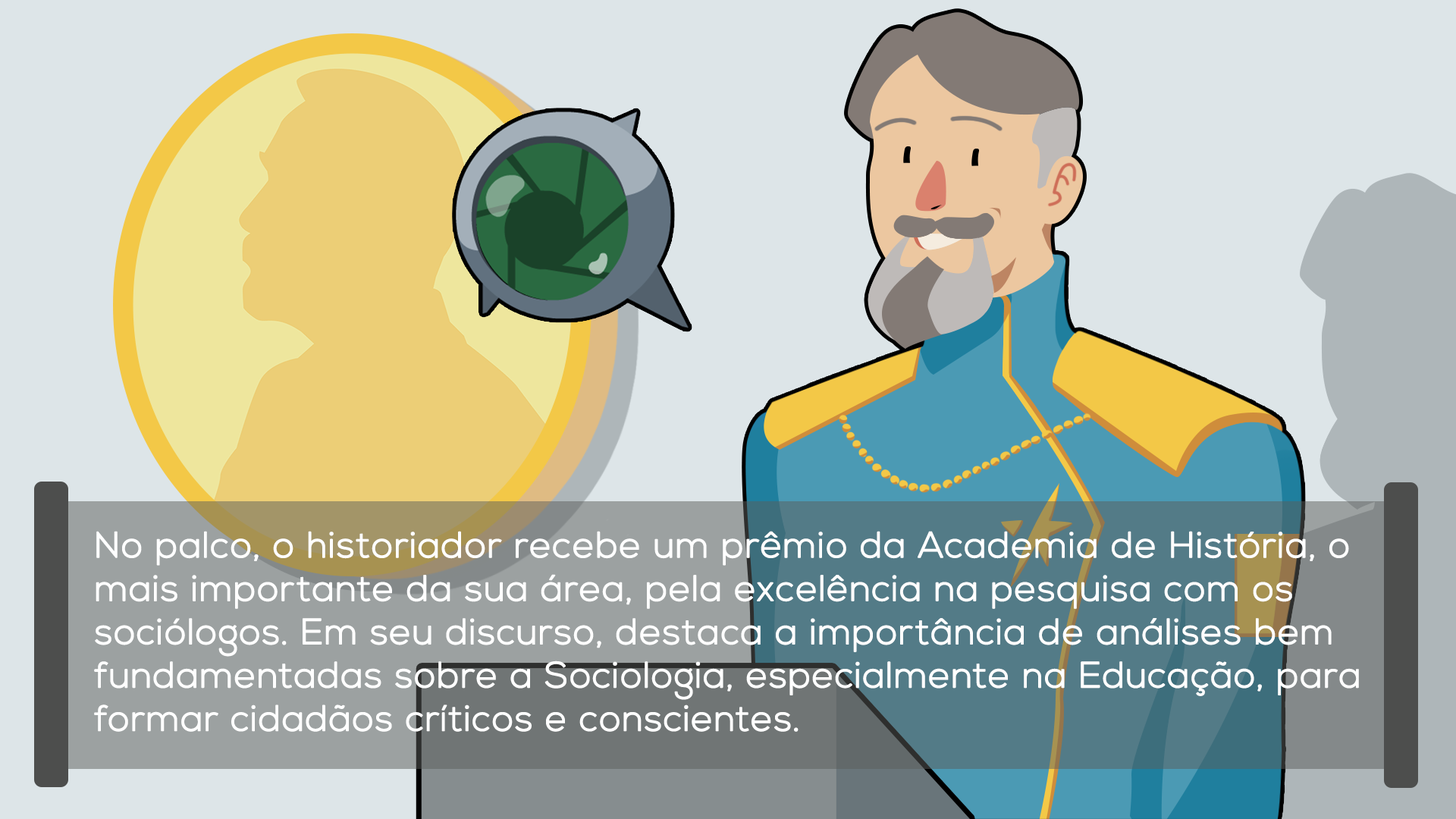
<style>
.page{position:relative;width:1456px;height:819px;background:#dde5e8}
.page>*{position:absolute;margin:0}
.t1{font:36.1px "NexaLight";letter-spacing:0.01em;color:#ffffff;font-weight:bold}
</style>
<div class="page">
<p class="t1" style="left:94px;top:531px;width:1265px;height:201px">No palco, o historiador recebe um prêmio da Academia de História, o mais importante da sua área, pela excelência na pesquisa com os sociólogos. Em seu discurso, destaca a importância de análises bem fundamentadas sobre a Sociologia, especialmente na Educação, para formar cidadãos críticos e conscientes.</p>
</div>
